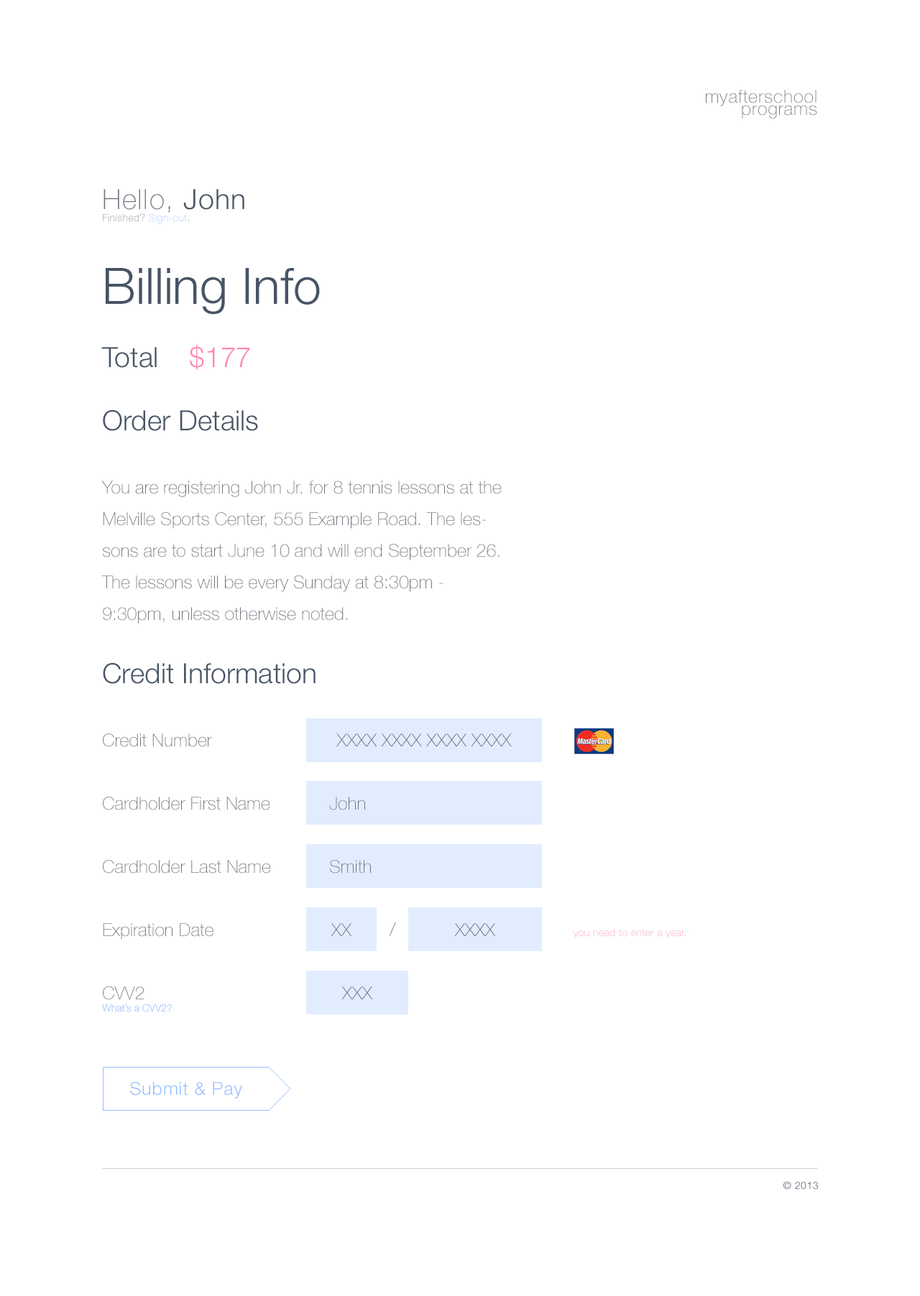
<style>
.page{position:relative;width:920px;height:1296px;background:#ffffff}
.page>*{position:absolute;margin:0}
.t1{font:18px/12.2px "HelveticaNeueLTStd-Th";letter-spacing:0.039em;color:#71767f}
.t2{font:10.1px/12.2px "HelveticaNeueLTStd-Th";letter-spacing:0.039em;color:#71767f}
.t3{font:28px/12.2px "HelveticaNeueLTStd-Th";letter-spacing:0.039em;color:#71767f}
.t4{font:28px/12.2px "HelveticaNeueLTStd-Lt";letter-spacing:0.039em;color:#475466}
.t5{font:10.1px/12.2px "HelveticaNeueLTStd-Th";letter-spacing:0.039em;color:#95beff}
.t6{font:18px/31.6px "HelveticaNeueLTStd-Th";color:#71767f}
.t7{font:50.3px/31.6px "HelveticaNeueLTStd-Lt";color:#475466}
.t8{font:28px/31.6px "HelveticaNeueLTStd-Lt";color:#475466}
.t9{font:28px/31.6px "HelveticaNeueLTStd-Lt";color:#ff87b2}
.t10{font:10.1px/12.2px "HelveticaNeueLTStd-Lt";color:#95beff}
.t11{font:18px "HelveticaNeueLTStd-Th";color:#71767f}
.t12{font:18px "HelveticaNeueLTStd-Th";letter-spacing:0.039em;color:#71767f}
.t13{font:10.1px "HelveticaNeueLTStd-Th";letter-spacing:0.039em}
.t14{font:18px "HelveticaNeueLTStd-Lt";letter-spacing:0.039em;color:#95beff}
.t15{font:10.1px "HelveticaNeueLTStd-Lt";letter-spacing:0.039em;color:#475467}
</style>
<div class="page">
<p class="t1" style="left:706px;top:90px;width:111px;height:29px;text-align:right">myafterschool<br>programs</p>
<p class="t2" style="left:103px;top:189px;width:141px;height:34px"><span class="t3">Hello, </span><span class="t4">John<br></span>Finished? <span class="t5">Sign-out</span>.</p>
<p class="t6" style="left:101px;top:268px;width:401px;height:745px"><span class="t7">Billing Info<br></span><span class="t8"><br>Total    </span><span class="t9">$177<br><br></span><span class="t8">Order Details<br><br></span>You are registering John Jr. for 8 tennis lessons at the Melville Sports Center, 555 Example Road. The lessons are to start June 10 and will end September 26. The lessons will be every Sunday at 8:30pm - 9:30pm, unless otherwise noted.<br><br><span class="t8">Credit Information<br><br></span>Credit Number<br><br>Cardholder First Name<br><br>Cardholder Last Name<br><br>Expiration Date<br><br>CVV2<br><span class="t10">What’s a CVV2?</span></p>
<p class="t11" style="left:336px;top:734px;width:176px;height:13px">XXXX XXXX XXXX XXXX</p>
<p class="t11" style="left:329px;top:797px;width:36px;height:14px">John</p>
<p class="t11" style="left:330px;top:860px;width:41px;height:14px">Smith</p>
<p class="t11" style="left:331px;top:923px;width:21px;height:13px">XX</p>
<p class="t12" style="left:389px;top:923px;width:7px;height:13px">/</p>
<p class="t11" style="left:454px;top:923px;width:42px;height:13px">XXXX</p>
<p class="t13" style="left:573px;top:929px;width:113px;height:10px">you need to enter a year.</p>
<p class="t11" style="left:341px;top:987px;width:32px;height:13px">XXX</p>
<p class="t14" style="left:130px;top:1082px;width:112px;height:17px">Submit &amp; Pay</p>
<p class="t15" style="left:783px;top:1181px;width:35px;height:9px">© 2013</p>
</div>
